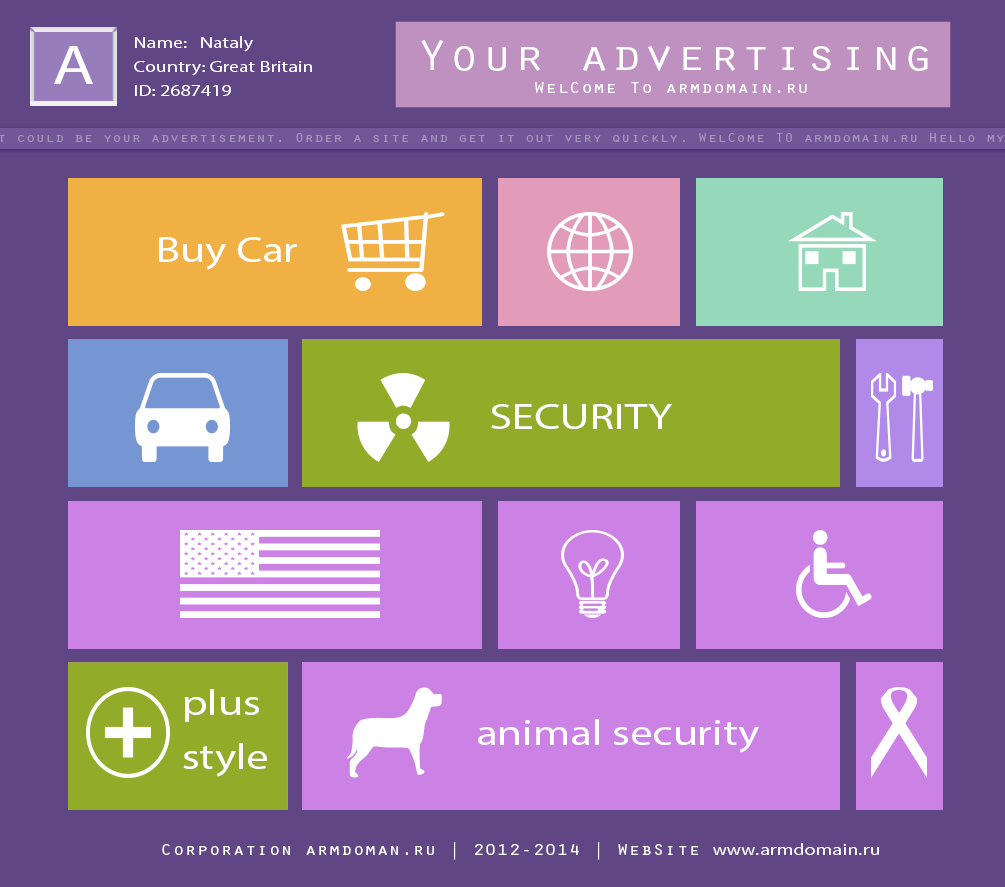
<style>
.page{position:relative;width:1005px;height:887px;background:#604685}
.page>*{position:absolute;margin:0}
.t1{font:16px "MyriadPro-Regular";color:#ffffff;scale:1.25 1}
.t2{font:43.2px "OratorStd";color:#ffffff;scale:1.25 1}
.t3{font:55.2px "MyriadPro-Regular";color:#ffffff;scale:1.25 1}
.t4{font:16px "OratorStd";color:#ffffff;scale:1.25 1}
.t5{font:36px "MyriadPro-Regular";color:#ffffff;scale:1.25 1}
.t6{font:16px "SourceSansPro-Regular";color:#ffffff;scale:1.25 1}
</style>
<div class="page">
<p class="t1" style="left:134px;top:36px;width:178px;height:60px">Name:   Nataly<br>Country: Great Britain<br>ID: 2687419</p>
<p class="t2" style="left:421px;top:40px;width:507px;height:31px">Your advertising</p>
<p class="t3" style="left:54px;top:46px;width:39px;height:38px">A</p>
<p class="t4" style="left:535px;top:82px;width:272px;height:11px">WelCome To armdomain.ru</p>
<p class="t5" style="left:159px;top:237px;width:138px;height:33px">Buy Car</p>
<p class="t5" style="left:491px;top:404px;width:182px;height:25px">SECURITY</p>
<p class="t5" style="left:183px;top:689px;width:84px;height:88px">plus<br>style</p>
<p class="t5" style="left:478px;top:719px;width:281px;height:34px">animal security</p>
<p class="t4" style="left:162px;top:842px;width:717px;height:18px">Corporation armdoman.ru | 2012-2014 | WebSite <span class="t6">www.armdomain.ru</span></p>
</div>
